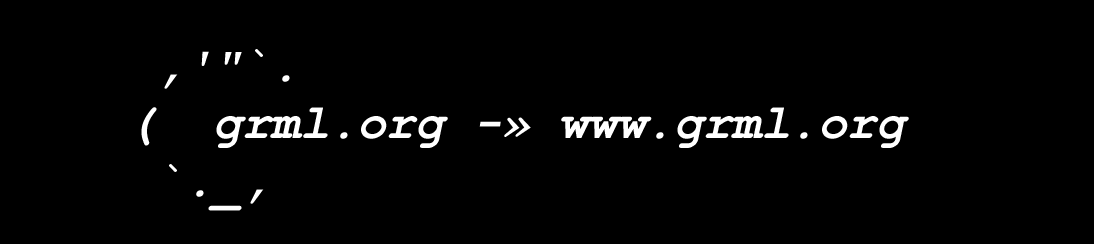
<style>
.page{position:relative;width:1094px;height:244px;background:#000000}
.page>*{position:absolute;margin:0}
.t1{font:48px "CourierNewPS-BoldItalicMT";color:#ffffff}
</style>
<div class="page">
<p class="t1" style="left:141px;top:49px;width:768px;height:162px">,'"`.<br>(  grml.org -» www.grml.org<br> `._,</p>
</div>
